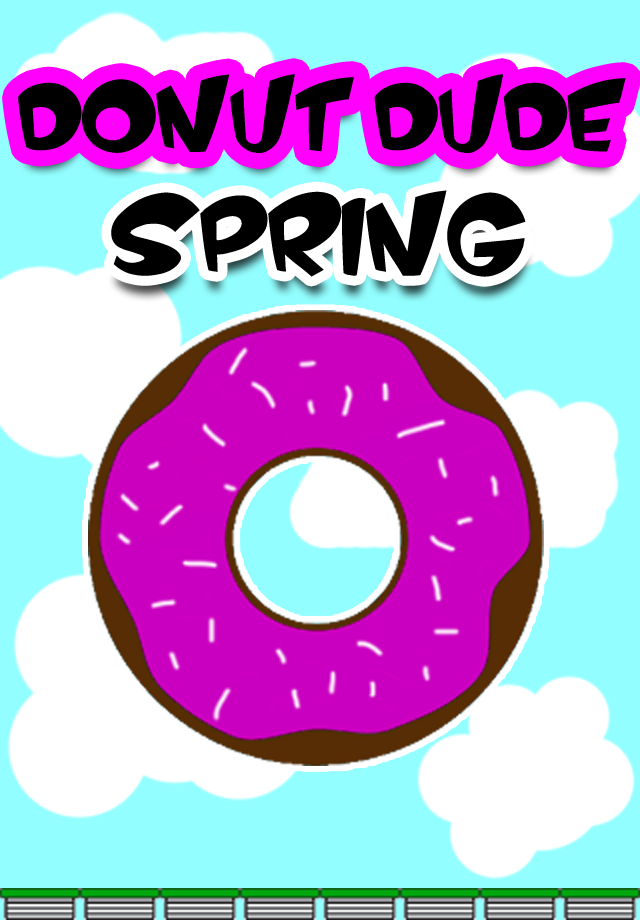
<style>
.page{position:relative;width:640px;height:920px;background:#92feff}
.page>*{position:absolute;margin:0}
.t1{font:82.6px "VTCScreamItLoud";color:#000000}
.t2{font:90.8px "VTCScreamItLoud";color:#000000}
</style>
<div class="page">
<p class="t1" style="left:18px;top:74px;width:608px;height:79px">DONUT DUDE</p>
<p class="t2" style="left:111px;top:190px;width:415px;height:87px">SPRING</p>
</div>
